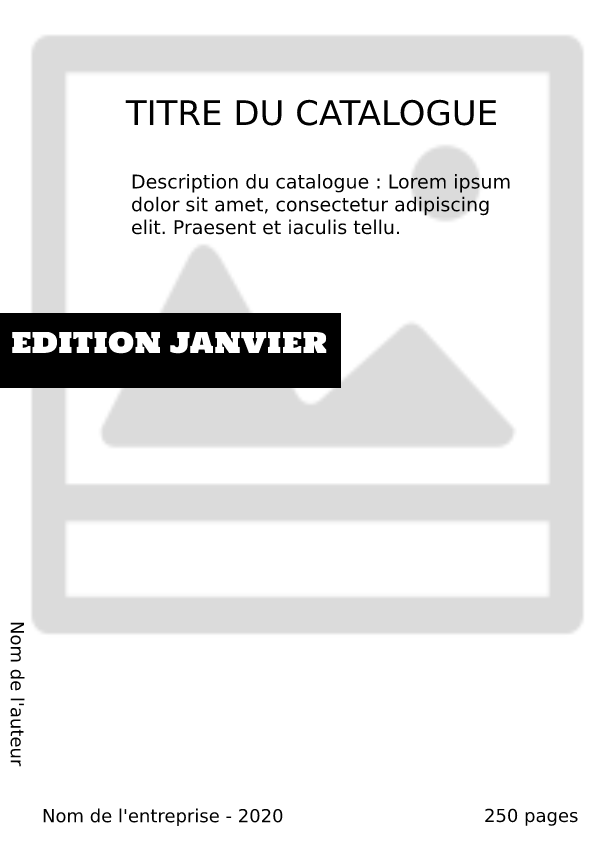
<style>
.page{position:relative;width:596px;height:842px;background:#ffffff}
.page>*{position:absolute;margin:0}
.t1{font:34px "DejaVuSans";color:#000000}
.t2{font:24px "DejaVuSans";color:#000000}
.t3{font:19px "DejaVuSans";color:#000000}
.t4{font:28px "HoltwoodOneSC";color:#ffffff}
.t5{font:18px "DejaVuSans";color:#000000}
</style>
<div class="page">
<p class="t1" style="left:125px;top:99px;width:371px;height:27px"><span class="t2"><br></span>TITRE DU CATALOGUE</p>
<p class="t3" style="left:132px;top:174px;width:378px;height:61px">Description du catalogue : Lorem ipsum dolor sit amet, consectetur adipiscing elit. Praesent et iaculis tellu.</p>
<p class="t4" style="left:12px;top:331px;width:315px;height:23px">EDITION JANVIER</p>
<p class="t5" style="left:10px;top:622px;width:15px;height:145px;rotate:90deg">Nom de l'auteur</p>
<p class="t5" style="left:43px;top:808px;width:240px;height:18px">Nom de l'entreprise - 2020</p>
<p class="t5" style="left:485px;top:808px;width:93px;height:18px">250 pages</p>
</div>
